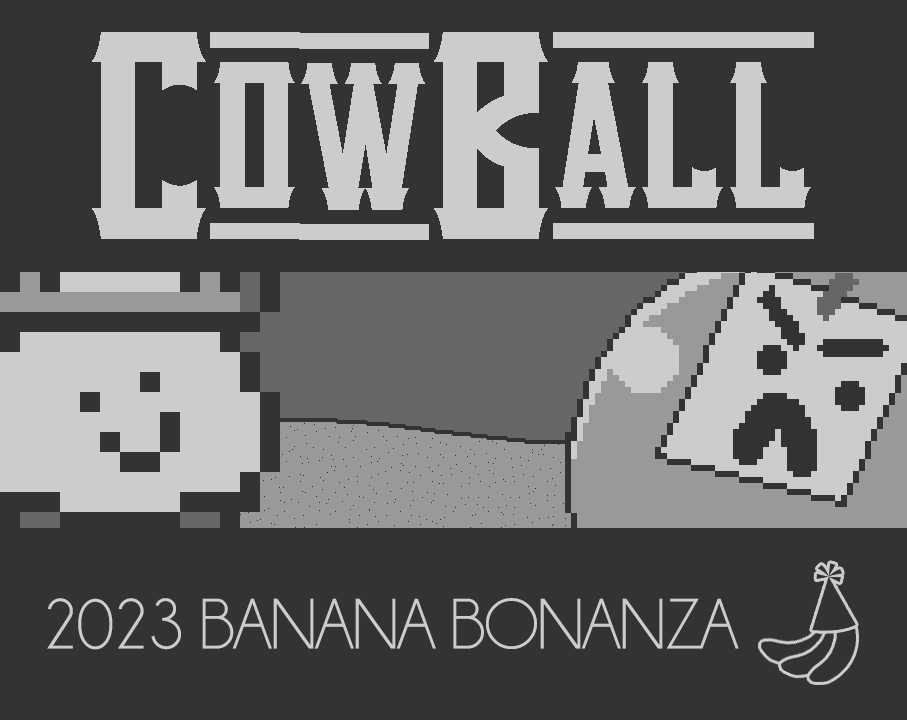
<style>
.page{position:relative;width:907px;height:720px;background:#333333}
.page>*{position:absolute;margin:0}
.t1{font:72px "Champagne&Limousines";letter-spacing:-0.03em;color:#cccccc}
</style>
<div class="page">
<p class="t1" style="left:47px;top:598px;width:692px;height:52px">2023 BANANA BONANZA</p>
</div>
